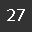
<style>
.page{position:relative;width:32px;height:32px;background:#333333}
.page>*{position:absolute;margin:0}
.t1{font:17.8px "MyriadPro-Regular";color:#ffffff;scale:1.12 1}
</style>
<div class="page">
<p class="t1" style="left:7px;top:9px;width:18px;height:12px">27</p>
</div>
